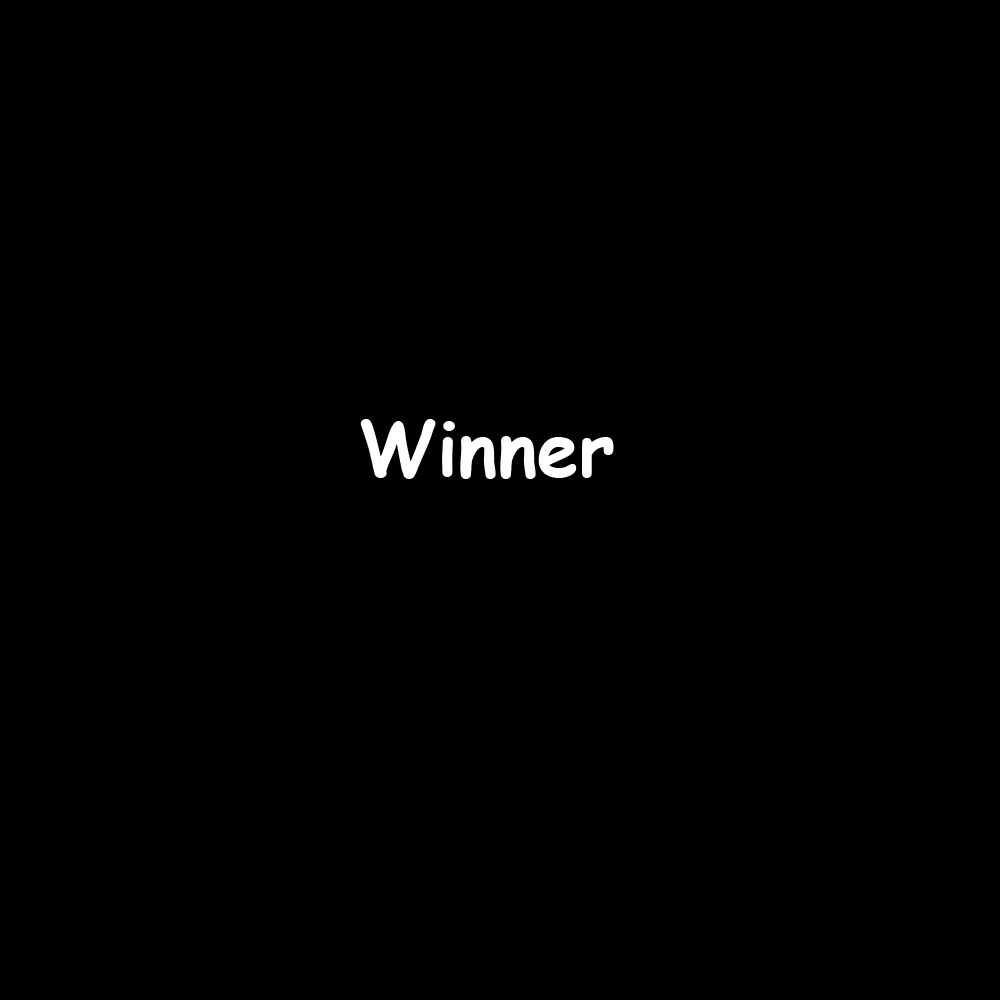
<style>
.page{position:relative;width:1000px;height:1000px;background:#000000}
.page>*{position:absolute;margin:0}
.t1{font:75px "ComicSansMS-Bold";color:#ffffff}
</style>
<div class="page">
<p class="t1" style="left:360px;top:419px;width:254px;height:60px">Winner</p>
</div>
